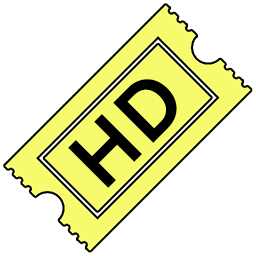
<style>
.page{position:relative;width:256px;height:256px;background:#ffffff}
.page>*{position:absolute;margin:0}
.t1{font:80px "Raleway-Bold";letter-spacing:0.05em;color:#000000}
</style>
<div class="page">
<p class="t1" style="left:68px;top:79px;width:109px;height:109px;rotate:-45deg">HD</p>
</div>
